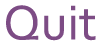
<style>
.page{position:relative;width:100px;height:45px;background:#ffffff}
.page>*{position:absolute;margin:0}
.t1{font:51px "Corbel";color:#7d4c85}
</style>
<div class="page">
<p class="t1" style="left:6px;top:5px;width:90px;height:36px">Quit</p>
</div>
